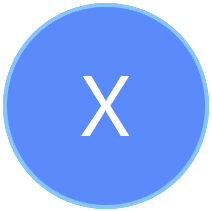
<style>
.page{position:relative;width:212px;height:211px;background:#5b8afb}
.page>*{position:absolute;margin:0}
.t1{font:86px "MicrosoftNewTaiLue";color:#ffffff}
</style>
<div class="page">
<p class="t1" style="left:81px;top:76px;width:49px;height:60px">X</p>
</div>
